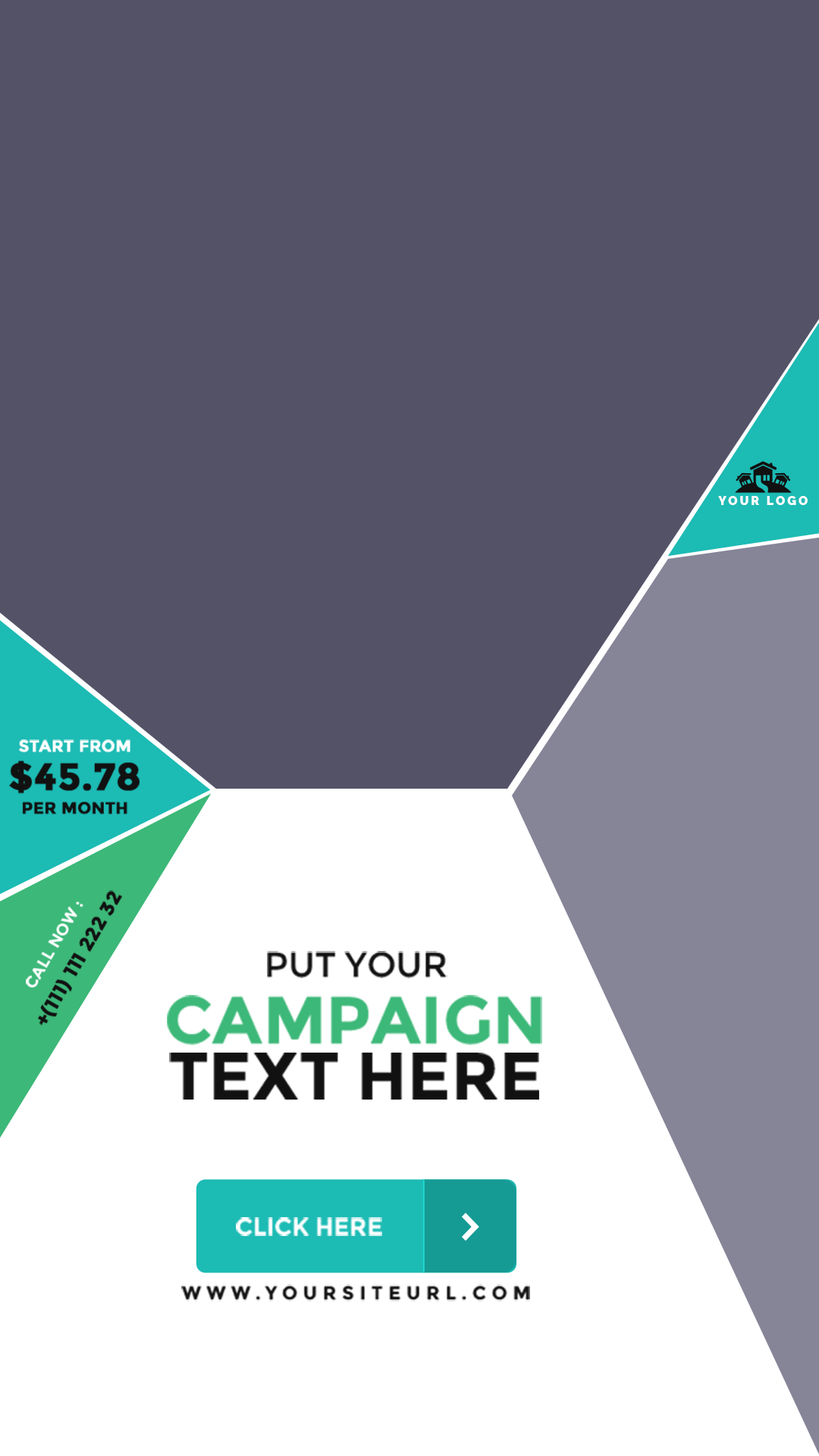
<style>
.page{position:relative;width:819px;height:1456px;background:#545267}
.page>*{position:absolute;margin:0}
.t1{font:11.8px "Raleway-Black";letter-spacing:0.2em;color:#ffffff;text-transform:uppercase}
.t2{font:16.4px/38.2px "Montserrat-Bold";color:#ffffff;text-transform:uppercase;font-weight:bold}
.t3{font:38.2px/38.2px "Montserrat-Bold";color:#111111;text-transform:uppercase;font-weight:bold}
.t4{font:16.4px/23.7px "Montserrat-Bold";color:#111111;text-transform:uppercase;font-weight:bold}
.t5{font:19.1px/29.1px "Montserrat-Bold";color:#111111;text-transform:uppercase;font-weight:bold}
.t6{font:16.4px/29.1px "Montserrat-Bold";color:#ffffff;text-transform:uppercase}
.t7{font:34.7px "Montserrat-Regular";color:#111111;text-transform:uppercase}
.t8{font:66.6px "Montserrat-Bold";color:#3cb878;text-transform:uppercase}
.t9{font:66.6px "Montserrat-Bold";color:#111111;text-transform:uppercase}
.t10{font:24px "Montserrat-Bold";color:#ffffff;text-transform:uppercase}
.t11{font:18.7px "Montserrat-Bold";letter-spacing:0.3em;color:#111111;text-transform:uppercase}
</style>
<div class="page">
<p class="t1" style="left:718px;top:496px;width:90px;height:9px">your logo</p>
<p class="t2" style="left:9px;top:739px;width:131px;height:75px;text-align:center">start from<br><span class="t3">$45.78<br></span><span class="t4">per month</span></p>
<p class="t5" style="left:26px;top:890px;width:96px;height:135px;text-align:center;rotate:-60deg"><span class="t6">call now :<br></span>+(111) 111 222 32</p>
<p class="t7" style="left:267px;top:951px;width:181px;height:27px">put your</p>
<p class="t8" style="left:167px;top:995px;width:375px;height:50px">campaign</p>
<p class="t9" style="left:169px;top:1053px;width:370px;height:47px">text here</p>
<p class="t10" style="left:236px;top:1217px;width:146px;height:19px">click here</p>
<p class="t11" style="left:181px;top:1284px;width:349px;height:17px">www.yoursiteurl.com</p>
</div>
